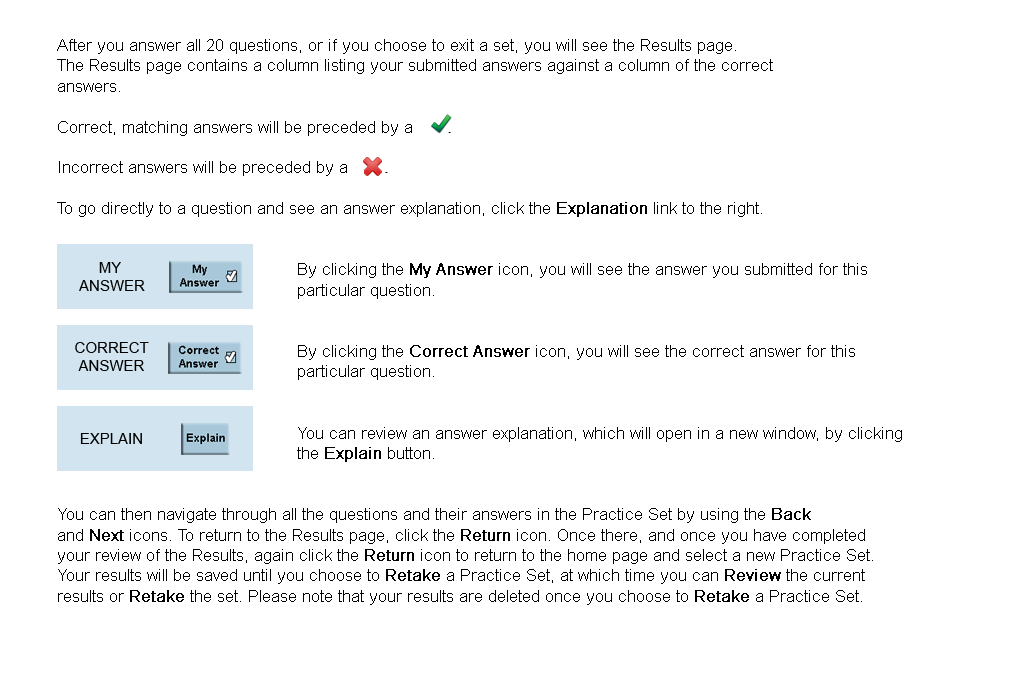
<style>
.page{position:relative;width:1024px;height:680px;background:#ffffff}
.page>*{position:absolute;margin:0}
.t1{font:17px "ArialMT";color:#000000}
.t2{font:16px "ArialMT";color:#000000;font-weight:bold}
.t3{font:15px "ArialMT";color:#000000}
</style>
<div class="page">
<p class="t1" style="left:57px;top:39px;width:845px;height:566px">After you answer all 20 questions, or if you choose to exit a set, you will see the Results page. <br>The Results page contains a column listing your submitted answers against a column of the correct <br>answers. <br><br>Correct, matching answers will be preceded by a           <br><br>Incorrect answers will be preceded by a <br><br>To go directly to a question and see an answer explanation, click the <span class="t2">Explanation</span> link to the right. <br><br>                                         <br>                                                By clicking the <span class="t2">My Answer</span> icon, you will see the answer you submitted for this <br>                                                particular question. <br><br><br>                                                By clicking the <span class="t2">Correct Answer</span> icon, you will see the correct answer for this <br>                                                particular question.<br><br><br>                                                You can review an answer explanation, which will open in a new window, by clicking <br>                                                the <span class="t2">Explain</span> button.<br><br><br>You can then navigate through all the questions and their answers in the Practice Set by using the <span class="t2">Back</span> <br>and <span class="t2">Next</span> icons. To return to the Results page, click the <span class="t2">Return</span> icon. Once there, and once you have completed <br>your review of the Results, again click the <span class="t2">Return</span> icon to return to the home page and select a new Practice Set. <br>Your results will be saved until you choose to <span class="t2">Retake</span> a Practice Set, at which time you can <span class="t2">Review</span> the current <br>results or <span class="t2">Retake</span> the set. Please note that your results are deleted once you choose to <span class="t2">Retake</span> a Practice Set.</p>
<p class="t3" style="left:79px;top:262px;width:66px;height:29px;text-align:center">MY <br>ANSWER</p>
<p class="t3" style="left:75px;top:342px;width:74px;height:29px;text-align:center">CORRECT<br>ANSWER</p>
<p class="t3" style="left:80px;top:433px;width:62px;height:11px">EXPLAIN</p>
</div>
